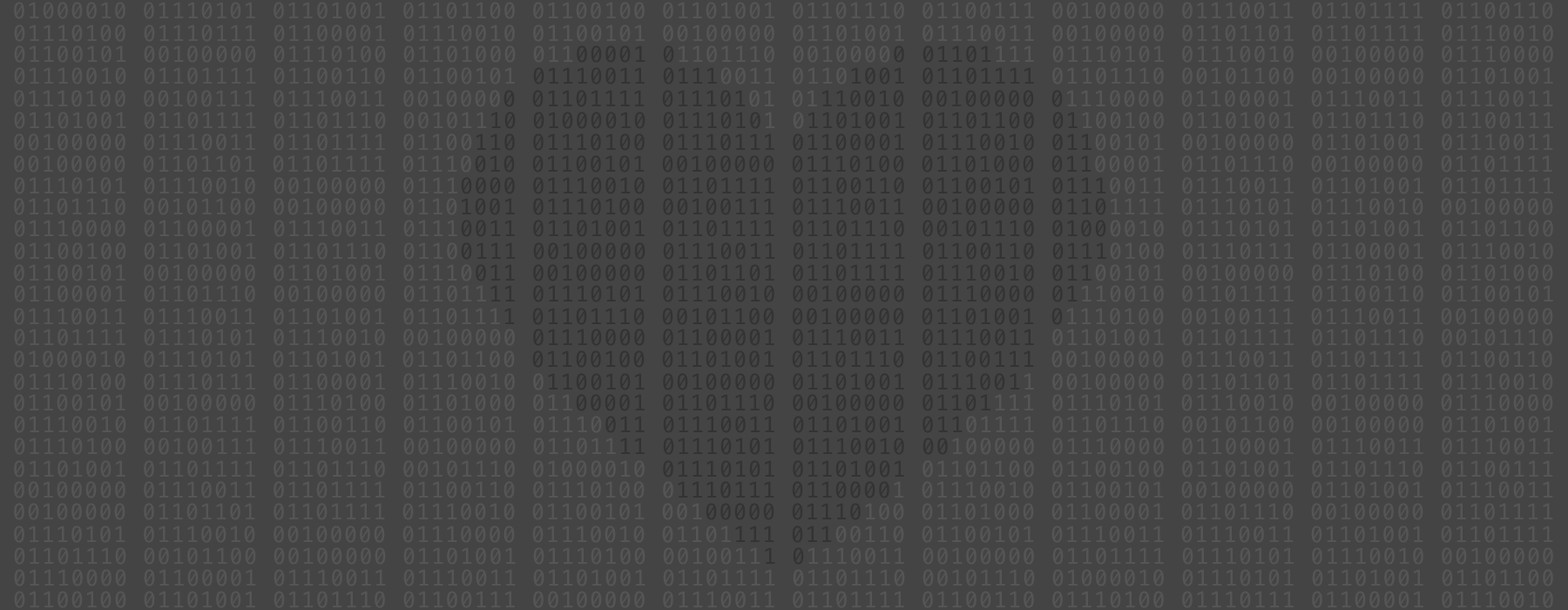
<style>
.page{position:relative;width:1568px;height:610px;background:#444444}
.page>*{position:absolute;margin:0}
.t1{font:21.8px "Menlo-Regular";letter-spacing:0.06em;color:#555555}
.t2{font:21.8px "Menlo-Regular";letter-spacing:0.06em;color:#333333}
</style>
<div class="page">
<p class="t1" style="left:14px;top:2px;width:1539px;height:17px">01000010 01110101 01101001 01101100 01100100 01101001 01101110 01100111 00100000 01110011 01101111 01100110</p>
<p class="t1" style="left:14px;top:24px;width:1539px;height:18px">01110100 01110111 01100001 01110010 01100101 00100000 01101001 01110011 00100000 01101101 01101111 01110010</p>
<p class="t1" style="left:14px;top:45px;width:1539px;height:18px">01100101 00100000 01110100 01101000 011<span class="t2">00001 0</span>1101110 0010000<span class="t2">0 01101</span>111 01110101 01110010 00100000 01110000</p>
<p class="t1" style="left:14px;top:67px;width:1539px;height:17px">01110010 01101111 01100110 01100101 <span class="t2">01110011 0111</span>0011 0110<span class="t2">1001 01101111 </span>01101110 00101100 00100000 01101001</p>
<p class="t1" style="left:14px;top:394px;width:1539px;height:17px">01100101 00100000 01110100 01101000 011<span class="t2">00001 01101110 00100000 01101</span>111 01110101 01110010 00100000 01110000</p>
<p class="t1" style="left:14px;top:416px;width:1539px;height:17px">01110010 01101111 01100110 01100101 01110<span class="t2">011 01110011 01101001 011</span>01111 01101110 00101100 00100000 01101001</p>
<p class="t1" style="left:14px;top:437px;width:1539px;height:18px">01110100 00100111 01110011 00100000 011011<span class="t2">11 01110101 01110010 00</span>100000 01110000 01100001 01110011 01110011</p>
<p class="t1" style="left:14px;top:460px;width:1539px;height:17px">01101001 01101111 01101110 00101110 01000010 <span class="t2">01110101 01101001 </span>01101100 01100100 01101001 01101110 01100111</p>
<p class="t1" style="left:14px;top:481px;width:1539px;height:17px">00100000 01110011 01101111 01100110 01110100 0<span class="t2">1110111 0110000</span>1 01110010 01100101 00100000 01101001 01110011</p>
<p class="t1" style="left:14px;top:503px;width:1539px;height:17px">00100000 01101101 01101111 01110010 01100101 001<span class="t2">00000 01110</span>100 01101000 01100001 01101110 00100000 01101111</p>
<p class="t1" style="left:14px;top:525px;width:1539px;height:18px">01110101 01110010 00100000 01110000 01110010 01101<span class="t2">111 011</span>00110 01100101 01110011 01110011 01101001 01101111</p>
<p class="t1" style="left:14px;top:547px;width:1539px;height:17px">01101110 00101100 00100000 01101001 01110100 0010011<span class="t2">1 0</span>1110011 00100000 01101111 01110101 01110010 00100000</p>
<p class="t1" style="left:14px;top:569px;width:1539px;height:17px">01110000 01100001 01110011 01110011 01101001 01101111 01101110 00101110 01000010 01110101 01101001 01101100</p>
<p class="t1" style="left:14px;top:591px;width:1539px;height:17px">01100100 01101001 01101110 01100111 00100000 01110011 01101111 01100110 01110100 01110111 01100001 01110010</p>
</div>
